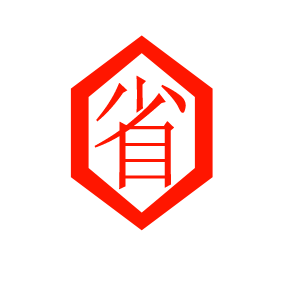
<style>
.page{position:relative;width:300px;height:300px;background:#ffffff}
.page>*{position:absolute;margin:0}
.t1{font:123.5px "SimSun";color:#ff1600;scale:0.86 1}
</style>
<div class="page">
<p class="t1" style="left:94px;top:75px;width:92px;height:115px">省</p>
</div>
